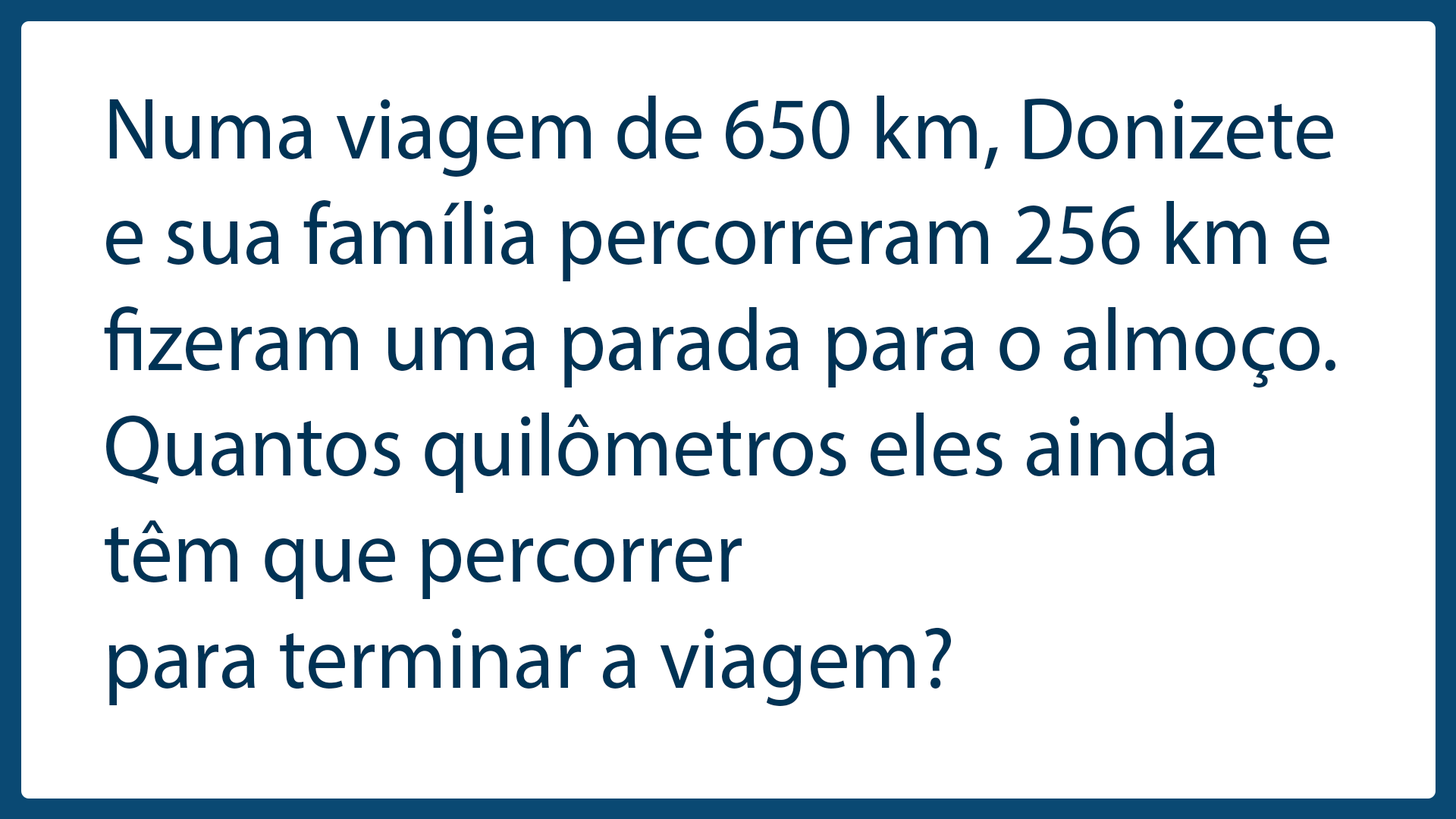
<style>
.page{position:relative;width:1456px;height:819px;background:#ffffff}
.page>*{position:absolute;margin:0}
.t1{font:88.2px "MyriadPro-Regular";color:#003355;scale:0.96 1}
</style>
<div class="page">
<p class="t1" style="left:104px;top:96px;width:1231px;height:610px">Numa viagem de 650 km, Donizete e sua família percorreram 256 km e fizeram uma parada para o almoço. Quantos quilômetros eles ainda têm que percorrer<br>para terminar a viagem?</p>
</div>
